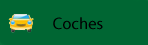
<style>
.page{position:relative;width:148px;height:45px;background:#006633}
.page>*{position:absolute;margin:0}
.t1{font:16.7px "MyriadPro-Regular";color:#000000}
</style>
<div class="page">
<p class="t1" style="left:53px;top:17px;width:50px;height:13px">Coches</p>
</div>
